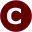
<style>
.page{position:relative;width:32px;height:32px;background:#660000}
.page>*{position:absolute;margin:0}
.t1{font:22px "Verdana-Bold";color:#ffffff}
</style>
<div class="page">
<p class="t1" style="left:7px;top:7px;width:14px;height:18px">C</p>
</div>
